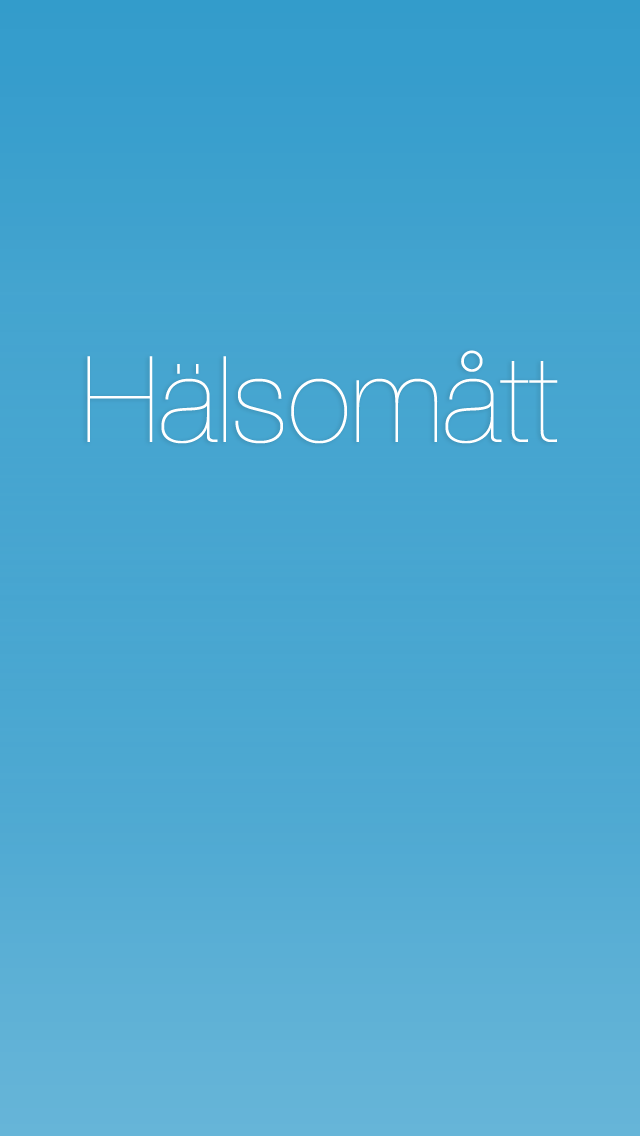
<style>
.page{position:relative;width:640px;height:1136px}
.page>*{position:absolute;margin:0}
.t1{font:120px "HelveticaNeue-UltraLight";color:#ffffff}
</style>
<div class="page">
<p class="t1" style="left:87px;top:350px;width:471px;height:94px">Hälsomått</p>
</div>
